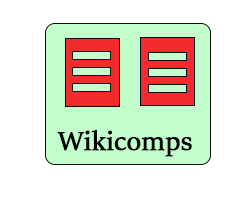
<style>
.page{position:relative;width:250px;height:200px;background:#ffffff}
.page>*{position:absolute;margin:0}
.t1{font:30px "SitkaBanner";color:#000000;font-weight:bold}
</style>
<div class="page">
<p class="t1" style="left:57px;top:130px;width:135px;height:27px">Wikicomps</p>
</div>
